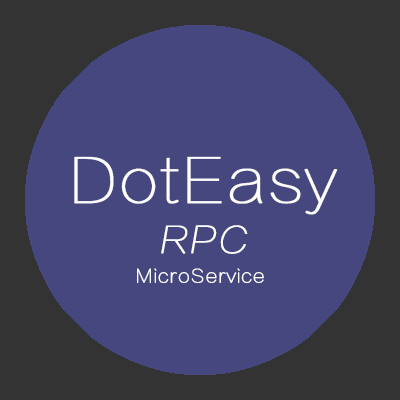
<style>
.page{position:relative;width:400px;height:400px;background:#46477f}
.page>*{position:absolute;margin:0}
.t1{font:60px/72px "FZLTCXHJW--GB1-0";color:#ffffff;font-weight:bold}
.t2{font:36px/72px "FZLTCXHJW--GB1-0";color:#ffffff;font-weight:bold;font-style:italic}
.t3{font:18px "FZLTCXHJW--GB1-0";letter-spacing:0.025em;color:#ffffff;font-weight:bold}
</style>
<div class="page">
<p class="t1" style="left:74px;top:156px;width:264px;height:98px;text-align:center">DotEasy<br><span class="t2">RPC</span></p>
<p class="t3" style="left:137px;top:268px;width:127px;height:15px">MicroService</p>
</div>
